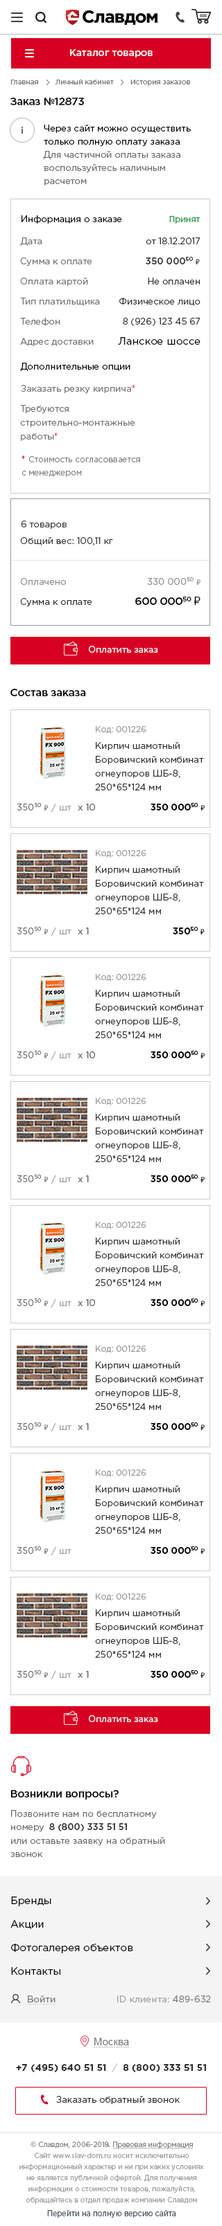
<style>
.page{position:relative;width:222px;height:2226px;background:#ffffff}
.page>*{position:absolute;margin:0}
.t1{font:9.7px "GothamPro-Medium";color:#ffffff}
.t2{font:6.9px "GothamPro";color:#737373}
.t3{font:10.9px "GothamPro-Medium";letter-spacing:-0.025em;color:#000000}
.t4{font:9px/13.2px "GothamPro";color:#6d6d6d}
.t5{font:9px/13.2px "GothamPro";color:#000000}
.t6{font:9px "GothamPro";color:#000000}
.t7{font:8.3px "GothamPro";color:#249542}
.t8{font:9px "GothamPro";color:#757575}
.t9{font:9px "GothamPro";color:#333333}
.t10{font:9px "GothamPro-Medium";color:#333333}
.t11{font:8.3px "Calibri";color:#333333}
.t12{font:10.4px "GothamPro";color:#000000}
.t13{font:9px/13.8px "GothamPro";color:#757575}
.t14{font:8.3px/13.2px "GothamPro";color:#848484}
.t15{font:9.7px/13.2px "GothamPro";color:#d70022}
.t16{font:9px "GothamPro";color:#8e8e8e}
.t17{font:8.3px "Calibri";color:#8e8e8e}
.t18{font:10.9px "ArialMT";letter-spacing:-0.025em;color:#000000}
.t19{font:9px "GothamPro";color:#ffffff}
.t20{font:8.3px "GothamPro";color:#9a9a9a}
.t21{font:9px/13.8px "GothamPro";color:#333333}
.t22{font:9px "GothamPro";color:#6e6e6e}
.t23{font:8.3px "Calibri";color:#6e6e6e}
.t24{font:9px "GothamPro";color:#a1a1a1}
.t25{font:9px "GothamPro";color:#595959}
.t26{font:9px "GothamPro-Bold";color:#000000}
.t27{font:9px "GothamPro-Medium";color:#000000}
.t28{font:8.3px "Calibri";color:#000000}
.t29{font:9px/13.2px "GothamPro";color:#6e6e6e}
.t30{font:10.4px/23.5px "GothamPro";color:#000000}
.t31{font:9px "GothamPro";letter-spacing:0.015em;color:#757679;text-decoration:underline}
.t32{font:9px "GothamPro";letter-spacing:0.015em}
.t33{font:10.4px "ArialMT";color:#737373}
.t34{font:9.5px "GothamPro-Bold";color:#2b3032}
.t35{font:9.5px "GothamPro-Light";color:#b4b7b8}
.t36{font:9px "GothamPro";color:#2b3032}
.t37{font:7.6px/11.1px "GothamPro";color:#9a9ea2;scale:0.89 1}
.t38{font:8.3px "GothamPro";color:#48535b;scale:0.89 1}
</style>
<div class="page">
<p class="t1" style="left:70px;top:49px;width:82px;height:8px">Каталог товаров</p>
<p class="t2" style="left:10px;top:80px;width:180px;height:6px">Главная        Личный кабинет        История заказов</p>
<p class="t3" style="left:10px;top:98px;width:74px;height:7px">Заказ №12873</p>
<p class="t4" style="left:43px;top:125px;width:147px;height:61px"><span class="t5">Через сайт можно осуществить <br>только полную оплату заказа <br></span>Для частичной оплаты заказа <br>воспользуйтесь наличным <br>расчетом</p>
<p class="t6" style="left:21px;top:215px;width:101px;height:9px">Информация о заказе</p>
<p class="t7" style="left:169px;top:216px;width:31px;height:8px">Принят</p>
<p class="t8" style="left:20px;top:237px;width:22px;height:9px">Дата</p>
<p class="t9" style="left:145px;top:237px;width:55px;height:7px">от 18.12.2017</p>
<p class="t8" style="left:20px;top:258px;width:72px;height:9px">Сумма к оплате</p>
<p class="t10" style="left:145px;top:257px;width:54px;height:8px">350 00050 <span class="t11">₽</span></p>
<p class="t8" style="left:20px;top:278px;width:68px;height:8px">Оплата картой</p>
<p class="t9" style="left:147px;top:278px;width:52px;height:7px">Не оплачен</p>
<p class="t8" style="left:20px;top:298px;width:80px;height:8px">Тип платильщика</p>
<p class="t9" style="left:119px;top:298px;width:81px;height:8px">Физическое лицо</p>
<p class="t8" style="left:20px;top:318px;width:40px;height:8px">Телефон</p>
<p class="t9" style="left:123px;top:318px;width:77px;height:8px">8 (926) 123 45 67</p>
<p class="t8" style="left:20px;top:338px;width:73px;height:8px">Адрес доставки</p>
<p class="t12" style="left:118px;top:337px;width:82px;height:8px">Ланское шоссе</p>
<p class="t6" style="left:20px;top:363px;width:110px;height:8px">Дополнительные опции</p>
<p class="t8" style="left:21px;top:385px;width:114px;height:9px">Заказать резку кирпича*</p>
<p class="t13" style="left:20px;top:405px;width:115px;height:36px">Требуются <br>строительно-монтажные <br>работы*</p>
<p class="t14" style="left:21px;top:456px;width:119px;height:21px"><span class="t15">* </span>Стоимость согласоввается <br>с менеджером</p>
<p class="t9" style="left:21px;top:521px;width:45px;height:8px">6 товаров</p>
<p class="t9" style="left:20px;top:537px;width:93px;height:9px">Общий вес: 100,11 кг</p>
<p class="t16" style="left:20px;top:578px;width:46px;height:7px">Оплачено</p>
<p class="t16" style="left:147px;top:577px;width:53px;height:9px">330 00050 <span class="t17">₽</span></p>
<p class="t9" style="left:20px;top:598px;width:72px;height:9px">Сумма к оплате</p>
<p class="t3" style="left:135px;top:597px;width:65px;height:8px">600 00050 <span class="t18">₽</span></p>
<p class="t19" style="left:89px;top:646px;width:69px;height:7px">Оплатить заказ</p>
<p class="t3" style="left:10px;top:689px;width:76px;height:7px">Состав заказа</p>
<p class="t20" style="left:96px;top:726px;width:50px;height:8px">Код: 001226</p>
<p class="t21" style="left:95px;top:742px;width:109px;height:49px">Кирпич шамотный <br>Боровичский комбинат <br>огнеупоров ШБ-8, <br>250*65*124 мм</p>
<p class="t22" style="left:17px;top:803px;width:31px;height:8px">35050 <span class="t23">₽</span></p>
<p class="t24" style="left:51px;top:804px;width:20px;height:8px">/ шт</p>
<p class="t25" style="left:78px;top:804px;width:17px;height:7px">х 10</p>
<p class="t26" style="left:150px;top:803px;width:54px;height:8px">350 000<span class="t27">50 </span><span class="t28">₽</span></p>
<p class="t20" style="left:96px;top:850px;width:50px;height:8px">Код: 001226</p>
<p class="t21" style="left:95px;top:866px;width:109px;height:49px">Кирпич шамотный <br>Боровичский комбинат <br>огнеупоров ШБ-8, <br>250*65*124 мм</p>
<p class="t22" style="left:17px;top:927px;width:31px;height:8px">35050 <span class="t23">₽</span></p>
<p class="t24" style="left:51px;top:928px;width:20px;height:8px">/ шт</p>
<p class="t25" style="left:78px;top:928px;width:11px;height:7px">х 1</p>
<p class="t26" style="left:172px;top:927px;width:32px;height:8px">350<span class="t27">50 </span><span class="t28">₽</span></p>
<p class="t20" style="left:96px;top:974px;width:50px;height:8px">Код: 001226</p>
<p class="t21" style="left:95px;top:990px;width:109px;height:48px">Кирпич шамотный <br>Боровичский комбинат <br>огнеупоров ШБ-8, <br>250*65*124 мм</p>
<p class="t22" style="left:17px;top:1051px;width:31px;height:8px">35050 <span class="t23">₽</span></p>
<p class="t24" style="left:51px;top:1052px;width:20px;height:8px">/ шт</p>
<p class="t25" style="left:78px;top:1052px;width:17px;height:7px">х 10</p>
<p class="t26" style="left:150px;top:1051px;width:54px;height:8px">350 000<span class="t27">50 </span><span class="t28">₽</span></p>
<p class="t20" style="left:96px;top:1098px;width:50px;height:8px">Код: 001226</p>
<p class="t21" style="left:95px;top:1114px;width:109px;height:48px">Кирпич шамотный <br>Боровичский комбинат <br>огнеупоров ШБ-8, <br>250*65*124 мм</p>
<p class="t22" style="left:17px;top:1175px;width:31px;height:8px">35050 <span class="t23">₽</span></p>
<p class="t24" style="left:51px;top:1176px;width:20px;height:8px">/ шт</p>
<p class="t25" style="left:78px;top:1176px;width:11px;height:6px">х 1</p>
<p class="t26" style="left:150px;top:1175px;width:54px;height:8px">350 000<span class="t27">50 </span><span class="t28">₽</span></p>
<p class="t20" style="left:96px;top:1222px;width:50px;height:8px">Код: 001226</p>
<p class="t21" style="left:95px;top:1238px;width:109px;height:48px">Кирпич шамотный <br>Боровичский комбинат <br>огнеупоров ШБ-8, <br>250*65*124 мм</p>
<p class="t22" style="left:17px;top:1299px;width:31px;height:8px">35050 <span class="t23">₽</span></p>
<p class="t24" style="left:51px;top:1299px;width:20px;height:9px">/ шт</p>
<p class="t25" style="left:78px;top:1299px;width:17px;height:7px">х 10</p>
<p class="t26" style="left:150px;top:1299px;width:54px;height:8px">350 000<span class="t27">50 </span><span class="t28">₽</span></p>
<p class="t20" style="left:96px;top:1346px;width:50px;height:7px">Код: 001226</p>
<p class="t21" style="left:95px;top:1362px;width:109px;height:48px">Кирпич шамотный <br>Боровичский комбинат <br>огнеупоров ШБ-8, <br>250*65*124 мм</p>
<p class="t22" style="left:17px;top:1423px;width:31px;height:8px">35050 <span class="t23">₽</span></p>
<p class="t24" style="left:51px;top:1423px;width:20px;height:9px">/ шт</p>
<p class="t25" style="left:78px;top:1423px;width:11px;height:7px">х 1</p>
<p class="t26" style="left:150px;top:1423px;width:54px;height:8px">350 000<span class="t27">50 </span><span class="t28">₽</span></p>
<p class="t20" style="left:96px;top:1470px;width:50px;height:7px">Код: 001226</p>
<p class="t21" style="left:95px;top:1486px;width:109px;height:48px">Кирпич шамотный <br>Боровичский комбинат <br>огнеупоров ШБ-8, <br>250*65*124 мм</p>
<p class="t22" style="left:17px;top:1547px;width:31px;height:8px">35050 <span class="t23">₽</span></p>
<p class="t24" style="left:51px;top:1547px;width:20px;height:9px">/ шт</p>
<p class="t26" style="left:150px;top:1547px;width:54px;height:8px">350 000<span class="t27">50 </span><span class="t28">₽</span></p>
<p class="t20" style="left:96px;top:1594px;width:50px;height:7px">Код: 001226</p>
<p class="t21" style="left:95px;top:1610px;width:109px;height:48px">Кирпич шамотный <br>Боровичский комбинат <br>огнеупоров ШБ-8, <br>250*65*124 мм</p>
<p class="t22" style="left:17px;top:1671px;width:31px;height:8px">35050 <span class="t23">₽</span></p>
<p class="t24" style="left:51px;top:1671px;width:20px;height:9px">/ шт</p>
<p class="t25" style="left:78px;top:1671px;width:11px;height:7px">х 1</p>
<p class="t26" style="left:150px;top:1671px;width:54px;height:8px">350 000<span class="t27">50 </span><span class="t28">₽</span></p>
<p class="t19" style="left:89px;top:1716px;width:69px;height:6px">Оплатить заказ</p>
<p class="t3" style="left:10px;top:1790px;width:108px;height:10px">Возникли вопросы?</p>
<p class="t29" style="left:11px;top:1810px;width:145px;height:23px">Позвоните нам по бесплатному <br>номеру</p>
<p class="t10" style="left:49px;top:1824px;width:78px;height:8px">8 (800) 333 51 51</p>
<p class="t29" style="left:10px;top:1837px;width:155px;height:20px">или оставьте заявку на обратный <br>звонок</p>
<p class="t30" style="left:10px;top:1897px;width:123px;height:78px">Бренды           <br>Акции           <br>Фотогалерея объектов<br>Контакты</p>
<p class="t31" style="left:27px;top:1996px;width:29px;height:9px">Войти</p>
<p class="t32" style="left:117px;top:1996px;width:93px;height:7px">ID клиента: 489-632</p>
<p class="t33" style="left:94px;top:2038px;width:35px;height:8px">Москва</p>
<p class="t34" style="left:16px;top:2064px;width:190px;height:9px">+7 (495) 640 51 51  <span class="t35">/</span>  8 (800) 333 51 51</p>
<p class="t36" style="left:56px;top:2096px;width:123px;height:9px">Заказать обратный звонок</p>
<p class="t37" style="left:19px;top:2142px;width:185px;height:62px;text-align:center">© Славдом, 2006-2018. Правовая информация<br>Сайт www.slav-dom.ru носит исключительно<br>информационный характер и ни при каких условиях<br>не является публичной офертой. Для получения<br>информации о стоимости товаров, пожалуйста,<br>обращайтесь в отдел продаж компании Славдом</p>
<p class="t38" style="left:47px;top:2211px;width:129px;height:8px">Перейти на полную версию сайта</p>
</div>
